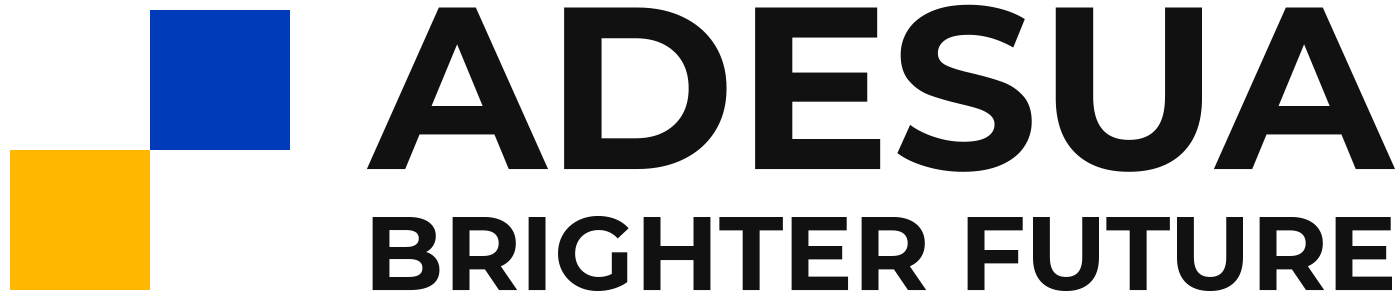
<style>
.page{position:relative;width:1400px;height:300px;background:#ffffff}
.page>*{position:absolute;margin:0}
.t1{font:230.6px "Montserrat-Bold";color:#111111}
.t2{font:104px "Montserrat-Bold";color:#111111}
</style>
<div class="page">
<p class="t1" style="left:366px;top:4px;width:1029px;height:168px">ADESUA</p>
<p class="t2" style="left:372px;top:216px;width:1020px;height:75px">BRIGHTER FUTURE</p>
</div>
